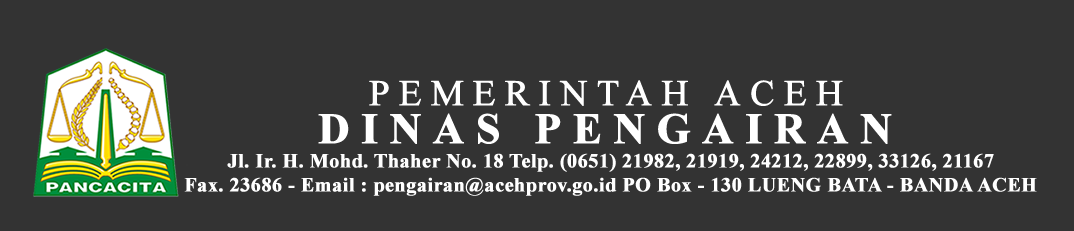
<style>
.page{position:relative;width:1074px;height:231px;background:#333333}
.page>*{position:absolute;margin:0}
.t1{font:20px/24px "TimesNewRomanPS-BoldMT";color:#ffffff;font-weight:bold}
.t2{font:36.2px/38px "TimesNewRomanPSMT";letter-spacing:0.24em;color:#ffffff;font-weight:bold}
.t3{font:43.4px/38px "TimesNewRomanPS-BoldMT";letter-spacing:0.24em;color:#ffffff;font-weight:bold}
</style>
<div class="page">
<p class="t1" style="left:184px;top:80px;width:853px;height:116px;text-align:center"><span class="t2">PEMERINTAH ACEH<br></span><span class="t3">DINAS PENGAIRAN<br></span>Jl. Ir. H. Mohd. Thaher No. 18 Telp. (0651) 21982, 21919, 24212, 22899, 33126, 21167<br>Fax. 23686 - Email : pengairan@acehprov.go.id PO Box - 130 LUENG BATA - BANDA ACEH</p>
</div>
